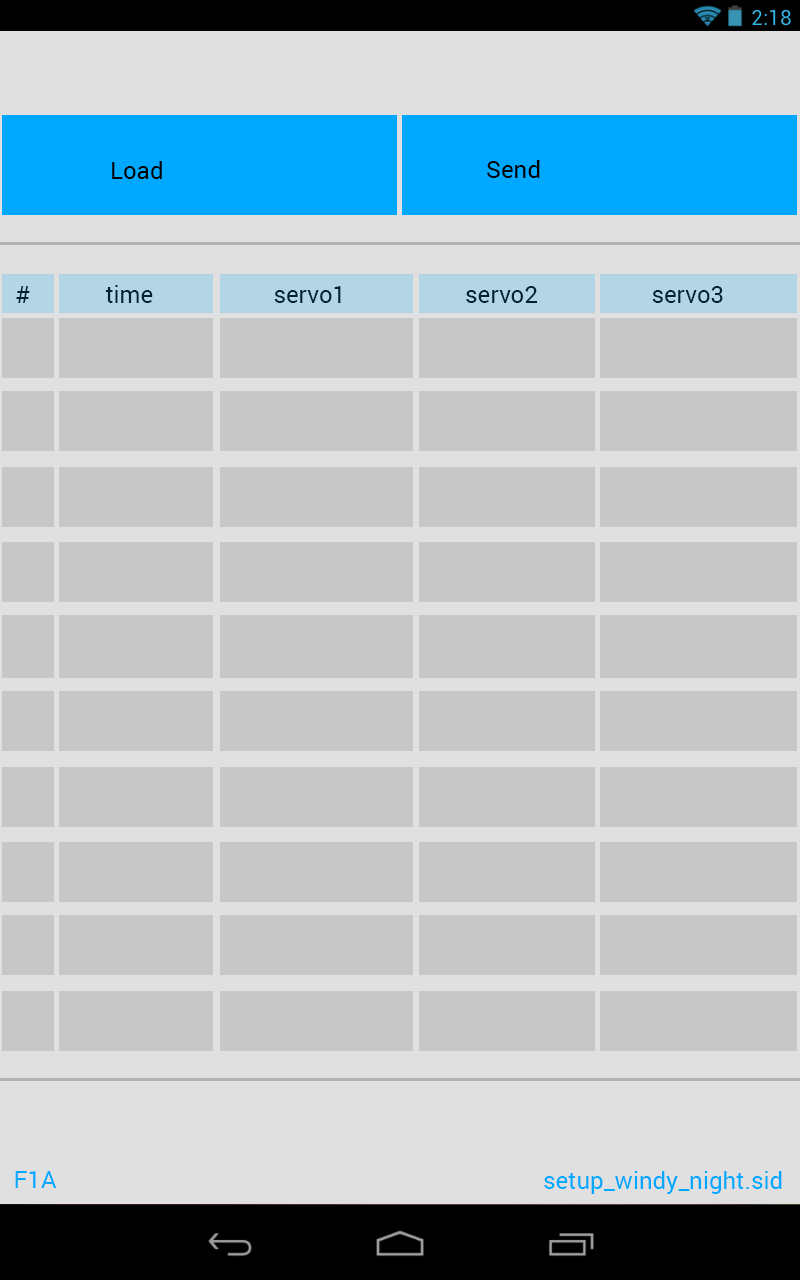
<style>
.page{position:relative;width:800px;height:1280px;background:#c7c7c7}
.page>*{position:absolute;margin:0}
.t1{font:24px "Roboto-Regular";color:#000000}
.t2{font:24px "Roboto-Regular";color:#002233}
.t3{font:24px "Roboto-Regular";color:#00a8ff}
</style>
<div class="page">
<p class="t1" style="left:112px;top:161px;width:50px;height:18px">Load</p>
<p class="t1" style="left:487px;top:160px;width:53px;height:18px">Send</p>
<p class="t2" style="left:16px;top:285px;width:707px;height:18px">#     time                servo1           servo2       servo3</p>
<p class="t3" style="left:15px;top:1171px;width:42px;height:17px">F1A</p>
<p class="t3" style="left:544px;top:1171px;width:238px;height:23px">setup_windy_night.sid</p>
</div>
